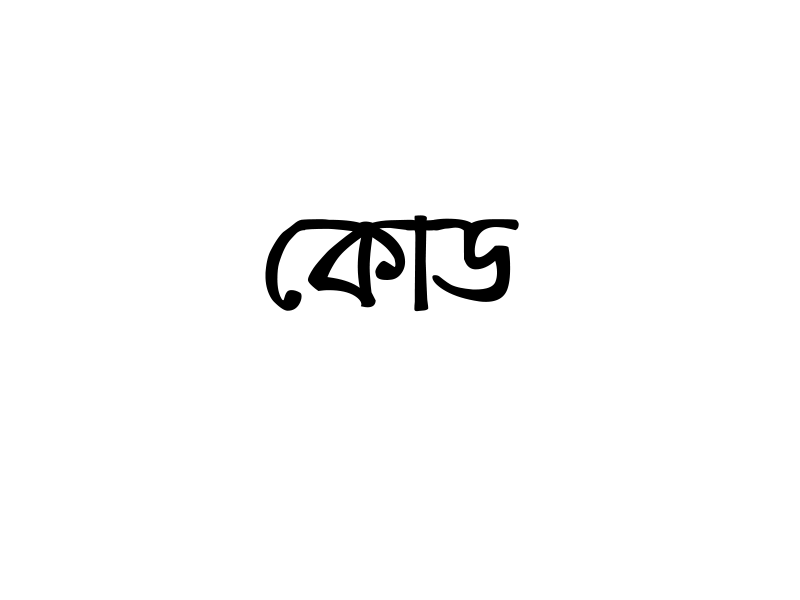
<style>
.page{position:relative;width:800px;height:600px;background:#ffffff}
.page>*{position:absolute;margin:0}
.t1{font:150px "BenSenHandwriting";color:#000000}
</style>
<div class="page">
<p class="t1" style="left:265px;top:215px;width:254px;height:97px">কোড</p>
</div>
